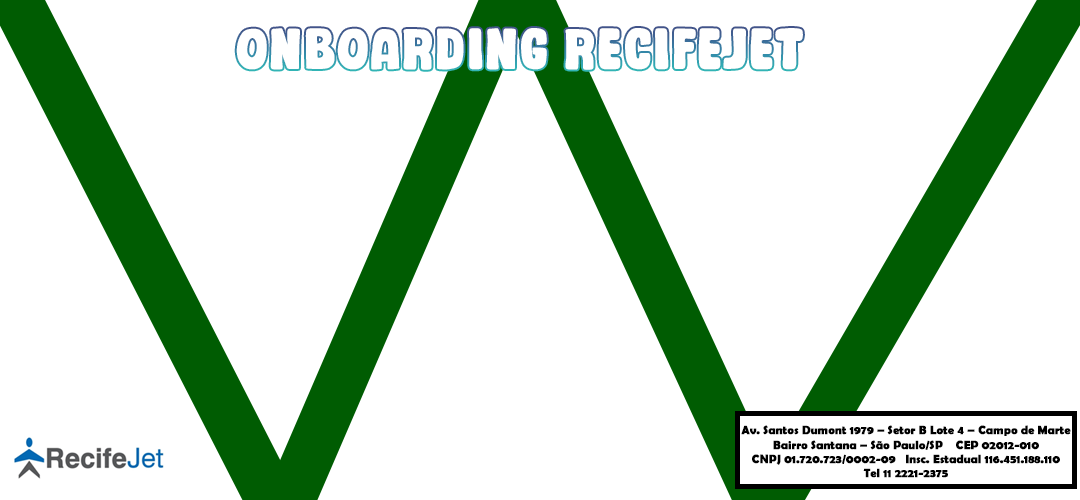
<style>
.page{position:relative;width:1080px;height:500px;background:#ffffff}
.page>*{position:absolute;margin:0}
.t1{font:53.5px "Chatlong";color:#ffffff;font-weight:bold}
.t2{font:12px "BerlinSansFBDemi-Bold";color:#000000;font-weight:bold}
</style>
<div class="page">
<p class="t1" style="left:236px;top:28px;width:567px;height:42px">ONBOARDING RECIFEJET</p>
<p class="t2" style="left:741px;top:425px;width:330px;height:53px;text-align:justify">Av. Santos Dumont 1979 – Setor B Lote 4 – Campo de Marte<br>Bairro Santana – São Paulo/SP    CEP 02012-010<br>CNPJ 01.720.723/0002-09   Insc. Estadual 116.451.188.110<br>Tel 11 2221-2375</p>
</div>
